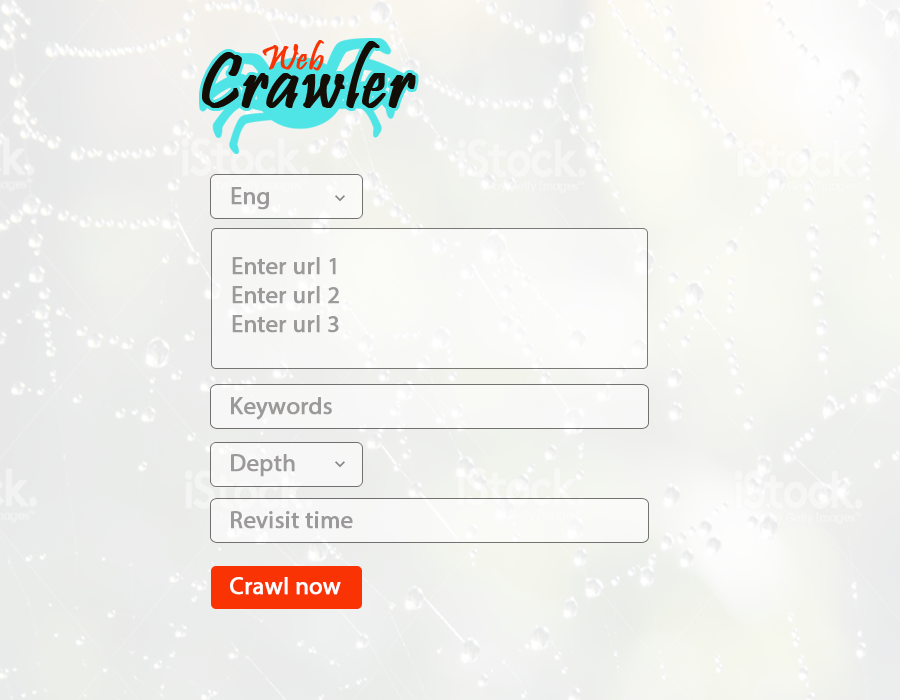
<style>
.page{position:relative;width:900px;height:700px}
.page>*{position:absolute;margin:0}
.t1{font:80px "Pristina-Regular";color:#130d06;font-weight:bold}
.t2{font:36px "Pristina-Regular";color:#fa3305;font-weight:bold}
.t3{font:24px "MyriadPro-Regular";color:#9b9999;font-weight:bold}
.t4{font:24px "MyriadPro-Regular";color:#ffffff;font-weight:bold}
</style>
<div class="page">
<p class="t1" style="left:202px;top:41px;width:214px;height:67px">Crawler</p>
<p class="t2" style="left:262px;top:40px;width:62px;height:31px">Web</p>
<p class="t3" style="left:231px;top:187px;width:38px;height:23px">Eng</p>
<p class="t3" style="left:232px;top:257px;width:107px;height:76px">Enter url 1<br>Enter url 2<br>Enter url 3</p>
<p class="t3" style="left:231px;top:397px;width:101px;height:23px">Keywords</p>
<p class="t3" style="left:231px;top:454px;width:64px;height:23px">Depth</p>
<p class="t3" style="left:231px;top:511px;width:122px;height:18px">Revisit time</p>
<p class="t4" style="left:230px;top:577px;width:111px;height:18px">Crawl now</p>
</div>
